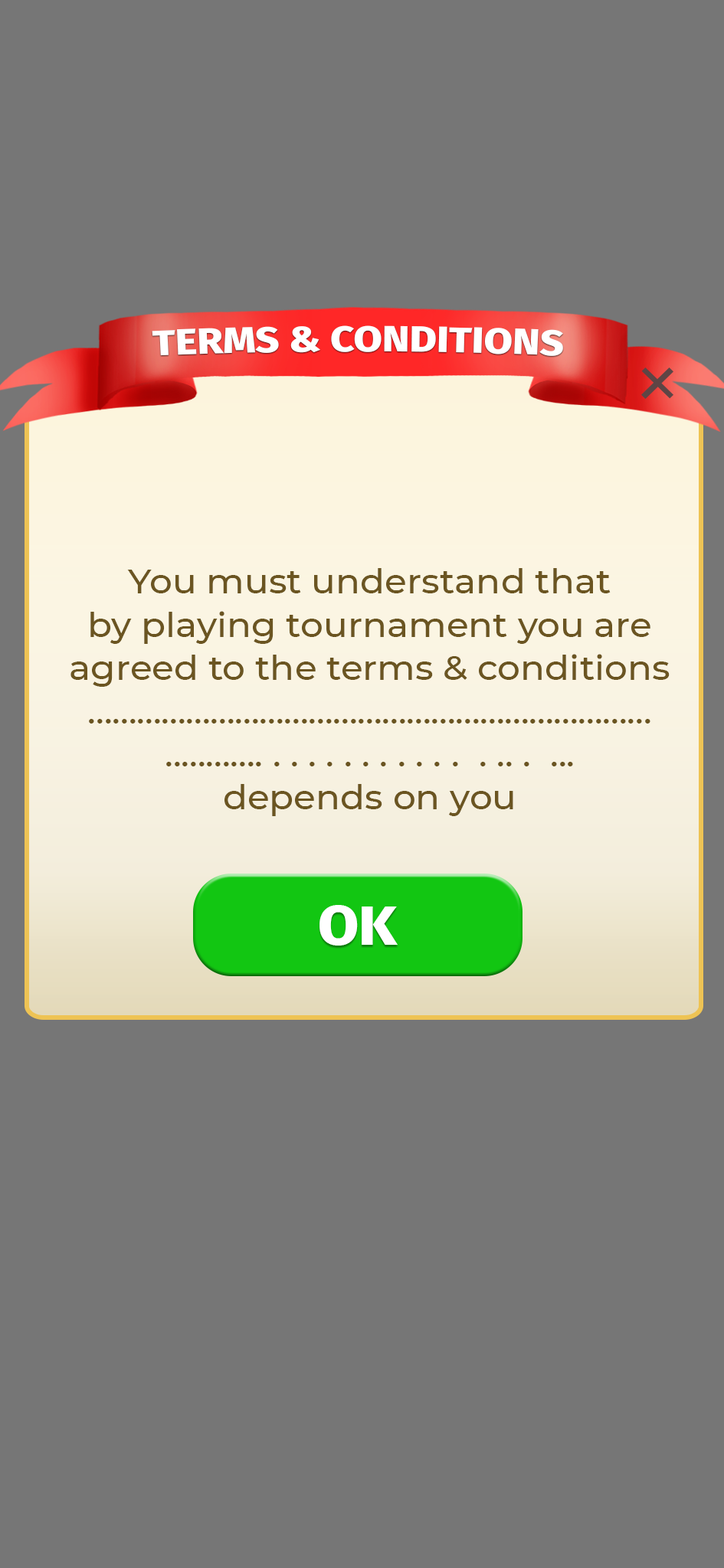
<style>
.page{position:relative;width:724px;height:1568px;background:#767676}
.page>*{position:absolute;margin:0}
.t1{font:35.7px "FiraSans-ExtraBold";color:#ffffff;scale:1.16 1}
.t2{font:34.2px "Montserrat-Medium";color:#6b5521;scale:1.05 1}
.t3{font:56px "FiraSans-ExtraBold";color:#ffffff;scale:1.05 1}
</style>
<div class="page">
<p class="t1" style="left:152px;top:325px;width:411px;height:31px">TERMS &amp; CONDITIONS</p>
<p class="t2" style="left:70px;top:568px;width:599px;height:248px;text-align:center">You must understand that<br>by playing tournament you are<br>agreed to the terms &amp; conditions<br>.....................................................................<br>............ . . . . . . . . . . .  . .. .  ...<br>depends on you</p>
<p class="t3" style="left:319px;top:905px;width:78px;height:41px">OK</p>
</div>
